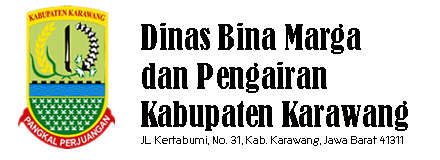
<style>
.page{position:relative;width:440px;height:160px;background:#ffffff}
.page>*{position:absolute;margin:0}
.t1{font:32px "BernardMT-Condensed";color:#030000}
.t2{font:12px "CicleFina";color:#030000}
</style>
<div class="page">
<p class="t1" style="left:141px;top:23px;width:267px;height:108px">Dinas Bina Marga <br>dan Pengairan <br>Kabupaten Karawang</p>
<p class="t2" style="left:141px;top:136px;width:262px;height:10px">JL. Kertabumi, No. 31, Kab. Karawang, Jawa Barat 41311</p>
</div>
